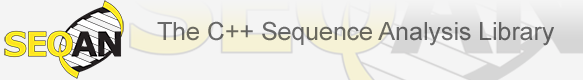
<style>
.page{position:relative;width:583px;height:80px;background:#f4f4f4}
.page>*{position:absolute;margin:0}
.t1{font:24.9px "ArialMT";color:#696860}
</style>
<div class="page">
<p class="t1" style="left:157px;top:21px;width:397px;height:25px">The C++ Sequence Analysis Library</p>
</div>
